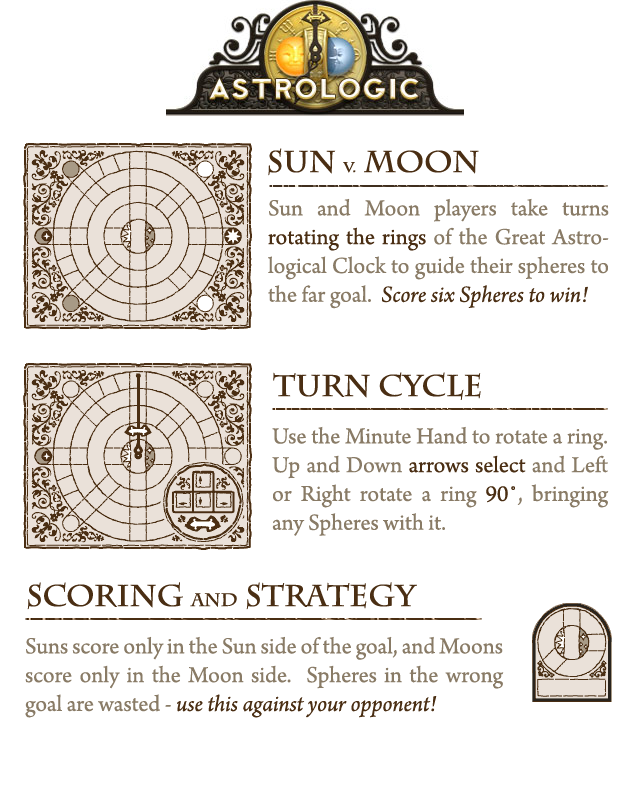
<style>
.page{position:relative;width:630px;height:800px;background:#ffffff}
.page>*{position:absolute;margin:0}
.t1{font:30px "CharlemagneStd-Bold";color:#4a2e13}
.t2{font:14px "CharlemagneStd-Bold";color:#4a2e13}
.t3{font:24px "ArnoPro-Regular";color:#897b66}
.t4{font:24px "ArnoPro-Regular";color:#4a2e13}
.t5{font:24px "ArnoPro-Italic";color:#4a2e13}
.t6{font:18px "CharlemagneStd-Bold";color:#4a2e13}
</style>
<div class="page">
<p class="t1" style="left:268px;top:148px;width:211px;height:28px">Sun <span class="t2">v.</span> Moon</p>
<p class="t3" style="left:268px;top:198px;width:341px;height:111px;text-align:justify">Sun and Moon players take turns <span class="t4">rotating the rings </span>of the Great Astrological Clock to guide their spheres to the far goal.  <span class="t5">Score six Spheres to win!</span></p>
<p class="t1" style="left:273px;top:372px;width:208px;height:28px">Turn cycle</p>
<p class="t3" style="left:272px;top:426px;width:337px;height:110px;text-align:justify">Use the Minute Hand to rotate a ring.  Up and Down <span class="t4">arrows select</span> and Left or Right rotate a ring <span class="t4">90˚</span>, bringing any Spheres with it.</p>
<p class="t1" style="left:27px;top:582px;width:390px;height:28px">Scoring <span class="t6">and</span> Strategy</p>
<p class="t3" style="left:25px;top:636px;width:479px;height:82px;text-align:justify">Suns score only in the Sun side of the goal, and Moons score only in the Moon side.  Spheres in the wrong goal are wasted - <span class="t5">use this against your opponent!</span></p>
</div>
